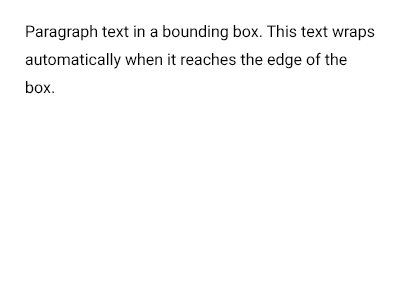
<style>
.page{position:relative;width:400px;height:300px;background:#ffffff}
.page>*{position:absolute;margin:0}
.t1{font:16px "Roboto-Regular";color:#000000}
</style>
<div class="page">
<p class="t1" style="left:25px;top:25px;width:350px;height:69px">Paragraph text in a bounding box. This text wraps automatically when it reaches the edge of the box.</p>
</div>
